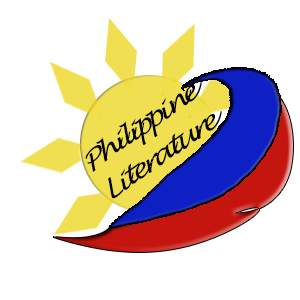
<style>
.page{position:relative;width:300px;height:300px;background:#ffffff}
.page>*{position:absolute;margin:0}
.t1{font:24.9px "LucidaHandwriting-Italic";letter-spacing:-0.14em;color:#000000;font-style:italic;scale:1.19 1}
</style>
<div class="page">
<p class="t1" style="left:85px;top:82px;width:137px;height:117px;rotate:-35deg">Philippine Literature</p>
</div>
